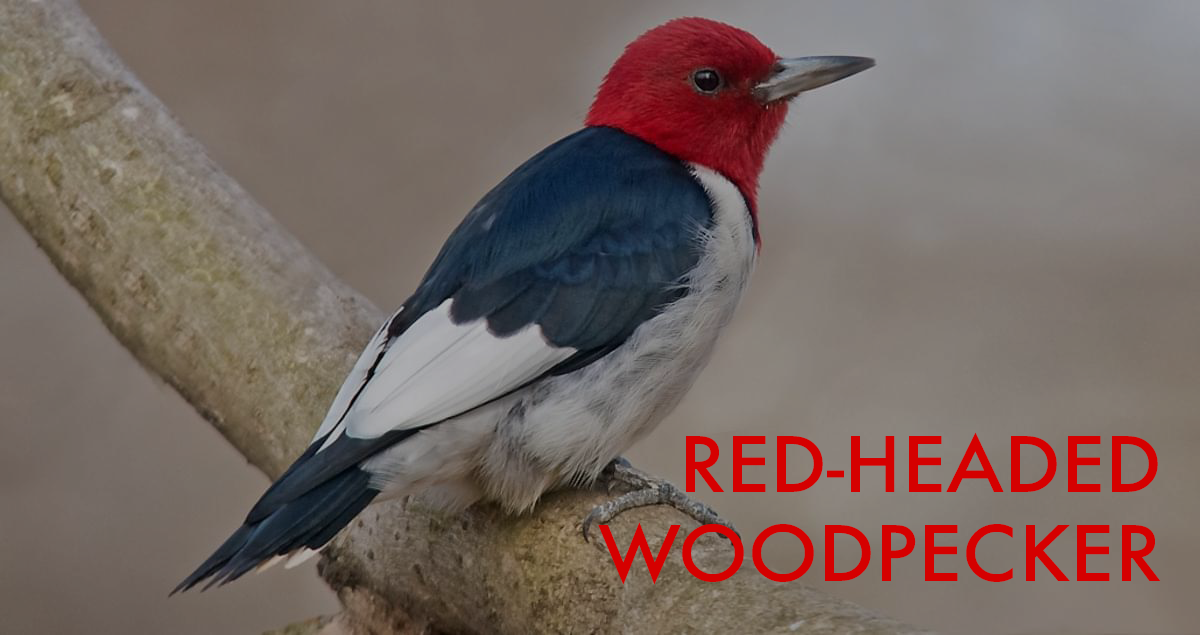
<style>
.page{position:relative;width:1200px;height:635px}
.page>*{position:absolute;margin:0}
.t1{font:74.3px "Futura-Medium";color:#d50000;scale:1.05 1}
</style>
<div class="page">
<p class="t1" style="left:598px;top:432px;width:563px;height:153px;text-align:right">RED-HEADED<br>WOODPECKER</p>
</div>
